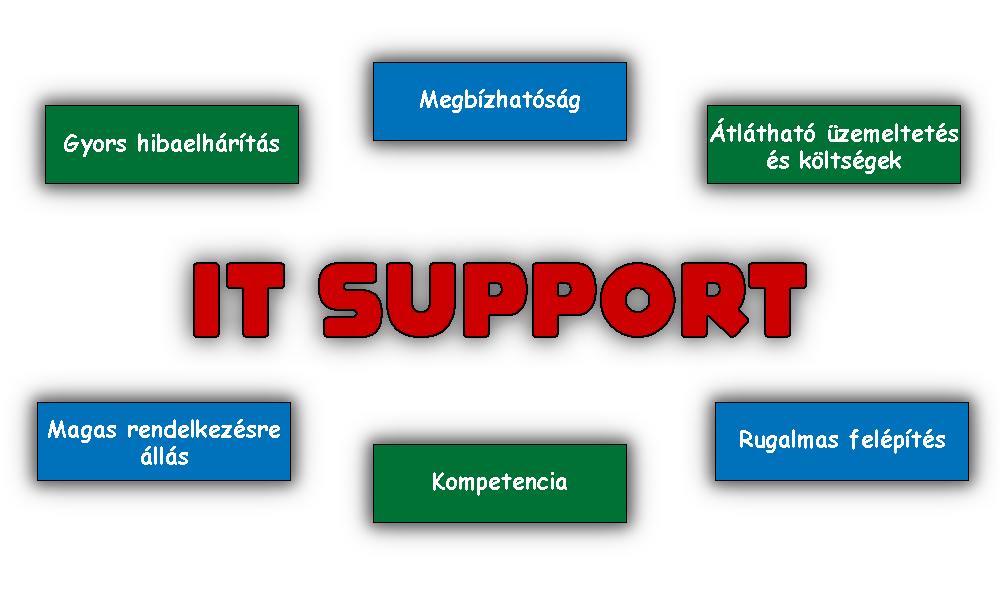
<style>
.page{position:relative;width:1000px;height:600px;background:#ffffff}
.page>*{position:absolute;margin:0}
.t1{font:23px "ComicSansMS-Bold";color:#ffffff}
.t2{font:23px "ComicSansMS";color:#ffffff}
.t3{font:111px "ToyBox";color:#cc0000}
</style>
<div class="page">
<p class="t1" style="left:420px;top:89px;width:160px;height:24px"><span class="t2"><br></span>Megbízhatóság</p>
<p class="t1" style="left:710px;top:118px;width:248px;height:56px;text-align:center">Átlátható üzemeltetés és költségek</p>
<p class="t1" style="left:64px;top:133px;width:215px;height:24px">Gyors hibaelhárítás</p>
<p class="t3" style="left:193px;top:262px;width:614px;height:76px">it support</p>
<p class="t1" style="left:48px;top:419px;width:232px;height:46px;text-align:center">Magas rendelkezésre állás</p>
<p class="t1" style="left:740px;top:429px;width:205px;height:25px">Rugalmas felépítés</p>
<p class="t1" style="left:433px;top:472px;width:134px;height:24px">Kompetencia</p>
</div>
